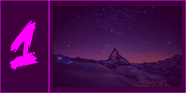
<style>
.page{position:relative;width:186px;height:93px;background:#400040}
.page>*{position:absolute;margin:0}
.t1{font:60px "LeviReBrushed";color:#ff00ff}
</style>
<div class="page">
<p class="t1" style="left:9px;top:20px;width:30px;height:50px">1</p>
</div>
